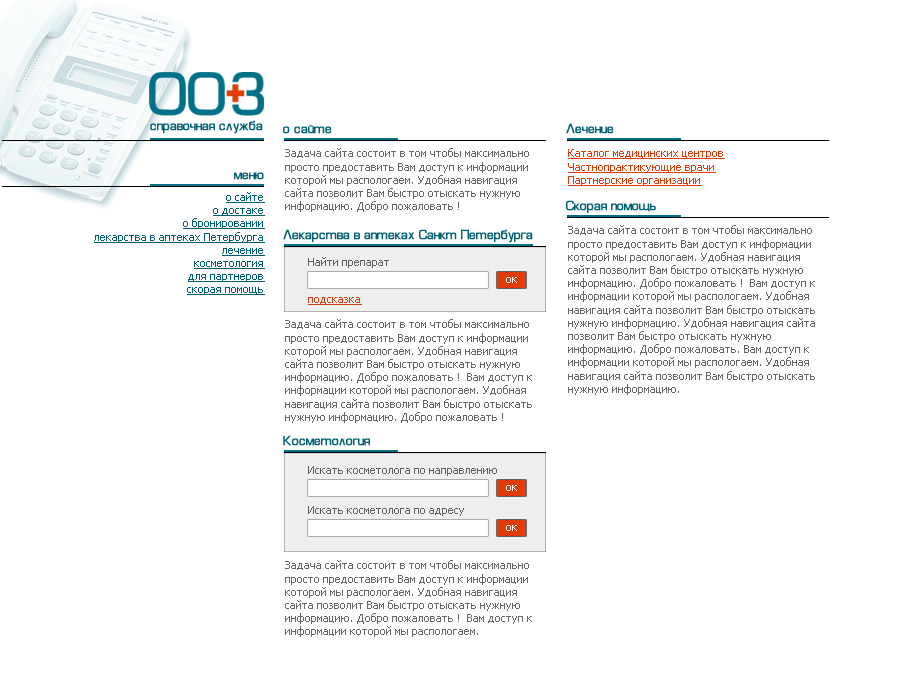
<style>
.page{position:relative;width:900px;height:700px;background:#ffffff}
.page>*{position:absolute;margin:0}
.t1{font:15px "EuroStyleNormal";color:#006074;font-weight:bold}
.t2{font:11px "Tahoma";color:#666666}
.t3{font:11px "Tahoma";color:#e03c09;text-decoration:underline}
.t4{font:11px "Tahoma";color:#005c70;text-decoration:underline}
.t5{font:11px "Tahoma";color:#606060}
.t6{font:11px "Tahoma";color:#ffffff}
.t7{font:11px "Tahoma";color:#d43f11;text-decoration:underline}
</style>
<div class="page">
<p class="t1" style="left:150px;top:120px;width:113px;height:14px">справочная служба</p>
<p class="t1" style="left:283px;top:125px;width:49px;height:9px">о сайте</p>
<p class="t1" style="left:566px;top:123px;width:48px;height:11px">Лечение</p>
<p class="t2" style="left:285px;top:148px;width:244px;height:64px">Задача сайта состоит в том чтобы максимально просто предоставить Вам доступ к информации которой мы распологаем. Удобная навигация сайта позволит Вам быстро отыскать нужную информацию. Добро пожаловать !</p>
<p class="t3" style="left:568px;top:149px;width:157px;height:37px">Каталог медицинских центров<br>Частнопрактикующие врачи<br>Партнерские организации</p>
<p class="t1" style="left:234px;top:172px;width:30px;height:8px">меню</p>
<p class="t4" style="left:94px;top:192px;width:171px;height:103px;text-align:right">о сайте<br>о достаке<br>о бронировании<br>лекарства в аптеках Петербурга<br>лечение<br>косметология<br>для партнеров<br>скорая помощь</p>
<p class="t1" style="left:566px;top:200px;width:90px;height:13px">Скорая помощь</p>
<p class="t1" style="left:283px;top:229px;width:250px;height:14px">Лекарства в аптеках Санкт Петербурга</p>
<p class="t2" style="left:568px;top:225px;width:247px;height:170px">Задача сайта состоит в том чтобы максимально просто предоставить Вам доступ к информации которой мы распологаем. Удобная навигация сайта позволит Вам быстро отыскать нужную информацию. Добро пожаловать !  Вам доступ к информации которой мы распологаем. Удобная навигация сайта позволит Вам быстро отыскать нужную информацию. Удобная навигация сайта позволит Вам быстро отыскать нужную информацию. Добро пожаловать. Вам доступ к информации которой мы распологаем. Удобная навигация сайта позволит Вам быстро отыскать нужную информацию.</p>
<p class="t5" style="left:308px;top:257px;width:81px;height:11px">Найти препарат</p>
<p class="t6" style="left:506px;top:277px;width:11px;height:6px">ок</p>
<p class="t7" style="left:308px;top:297px;width:54px;height:8px">подсказка</p>
<p class="t2" style="left:285px;top:319px;width:247px;height:104px">Задача сайта состоит в том чтобы максимально просто предоставить Вам доступ к информации которой мы распологаем. Удобная навигация сайта позволит Вам быстро отыскать нужную информацию. Добро пожаловать !  Вам доступ к информации которой мы распологаем. Удобная навигация сайта позволит Вам быстро отыскать нужную информацию. Добро пожаловать !</p>
<p class="t1" style="left:283px;top:435px;width:87px;height:11px">Косметология</p>
<p class="t5" style="left:308px;top:466px;width:189px;height:50px">Искать косметолога по направлению<br><br><br>Искать косметолога по адресу</p>
<p class="t2" style="left:285px;top:560px;width:247px;height:77px">Задача сайта состоит в том чтобы максимально просто предоставить Вам доступ к информации которой мы распологаем. Удобная навигация сайта позволит Вам быстро отыскать нужную информацию. Добро пожаловать !  Вам доступ к информации которой мы распологаем.</p>
</div>
